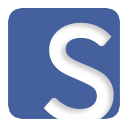
<style>
.page{position:relative;width:128px;height:128px;background:#45619d}
.page>*{position:absolute;margin:0}
.t1{font:142.4px "SourceSansPro-Regular";color:#ffffff;font-weight:bold}
</style>
<div class="page">
<p class="t1" style="left:43px;top:22px;width:71px;height:102px">S</p>
</div>
